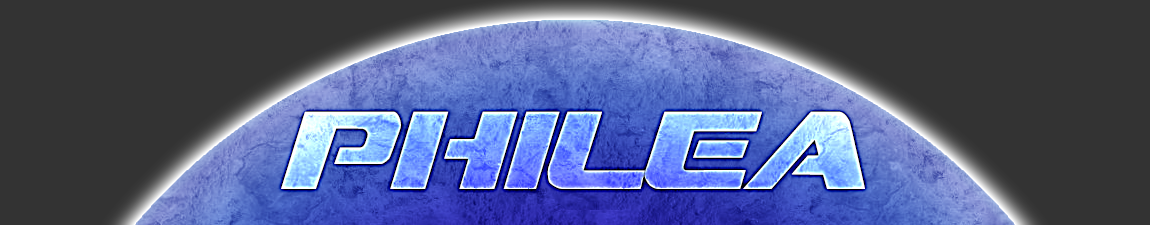
<style>
.page{position:relative;width:1150px;height:225px;background:#333333}
.page>*{position:absolute;margin:0}
.t1{font:110px "DreamMMA"}
</style>
<div class="page">
<p class="t1" style="left:281px;top:111px;width:584px;height:78px">philea</p>
</div>
